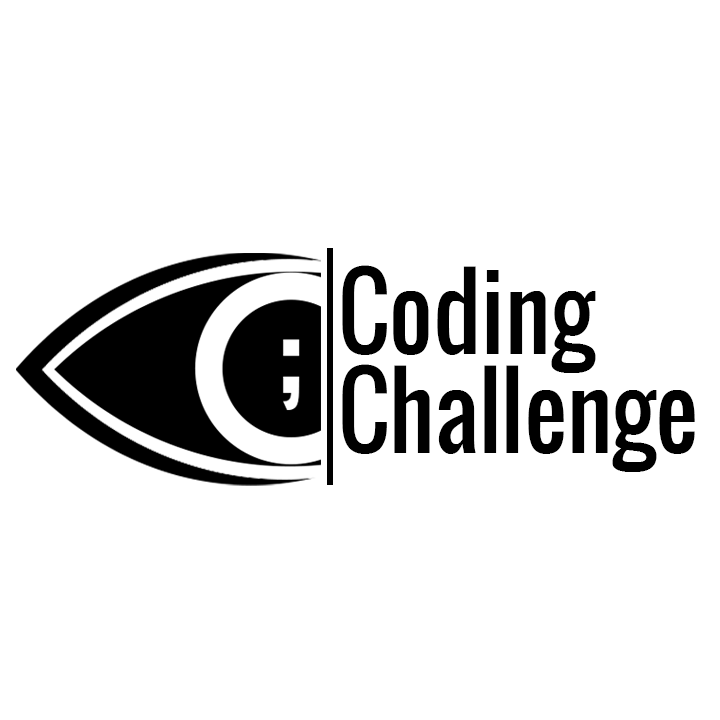
<style>
.page{position:relative;width:720px;height:720px;background:#ffffff}
.page>*{position:absolute;margin:0}
.t1{font:99.3px/99.3px "Oswald-Regular";color:#000000;scale:0.95 1}
</style>
<div class="page">
<p class="t1" style="left:342px;top:265px;width:353px;height:207px">Coding<br>Challenge</p>
</div>
